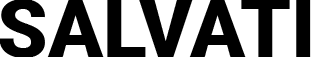
<style>
.page{position:relative;width:311px;height:57px;background:#000000}
.page>*{position:absolute;margin:0}
.t1{font:80.8px "Roboto-Black";color:#000000}
</style>
<div class="page">
<p class="t1" style="left:0px;top:0px;width:311px;height:58px">SALVATI</p>
</div>
